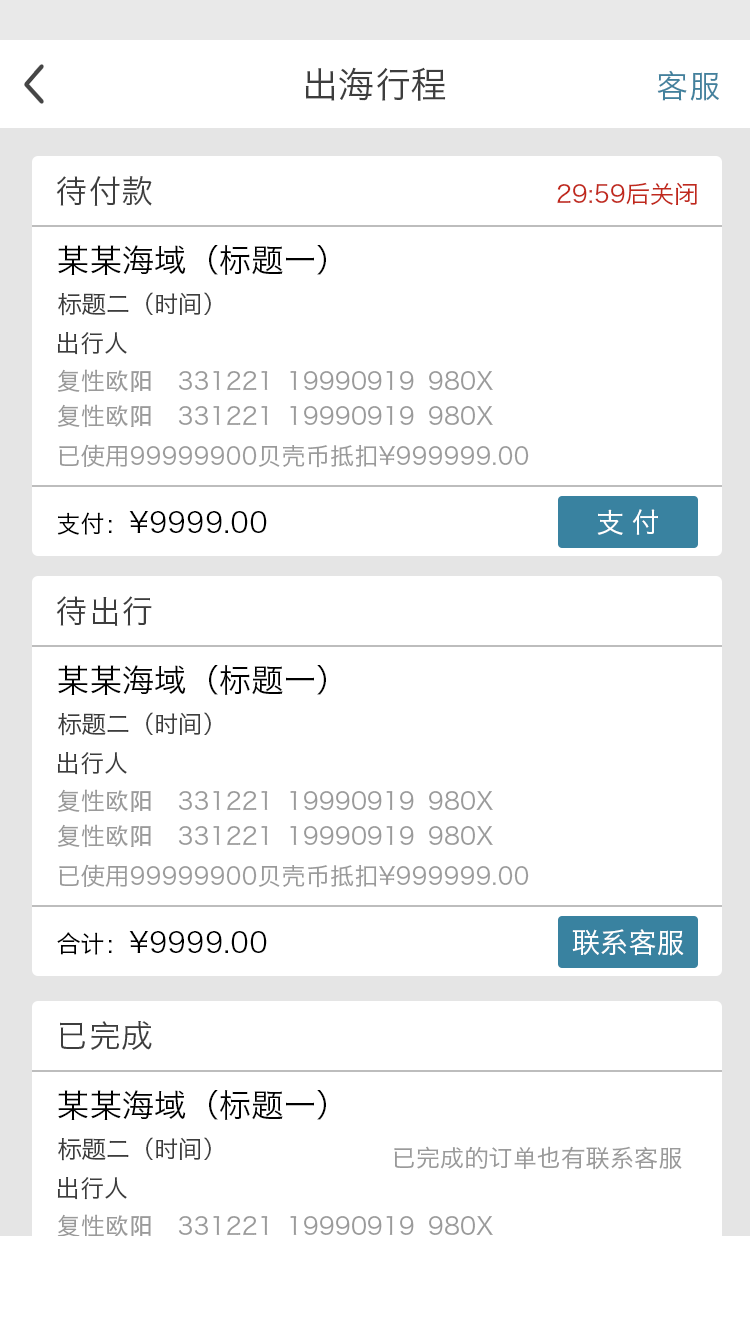
<style>
.page{position:relative;width:750px;height:1334px;background:#ffffff}
.page>*{position:absolute;margin:0}
.t1{font:36px "HiraginoSansGB-W3";color:#3d3d3d}
.t2{font:32px "HiraginoSansGB-W3";color:#42819d}
.t3{font:32px "HiraginoSansGB-W3";color:#3d3d3d}
.t4{font:24px "HiraginoSansGB-W3";color:#c1281c}
.t5{font:32px "HiraginoSansGB-W3";color:#000000}
.t6{font:24px "HiraginoSansGB-W3";color:#3d3d3d}
.t7{font:24px "HiraginoSansGB-W3";color:#9a9a9a}
.t8{font:24px "AdobeHeitiStd-Regular";color:#9a9a9a}
.t9{font:28px "HiraginoSansGB-W3";color:#ffffff}
.t10{font:28px "HiraginoSansGB-W3";color:#000000}
.t11{font:24px "HiraginoSansGB-W3";color:#000000}
</style>
<div class="page">
<p class="t1" style="left:305px;top:67px;width:141px;height:34px">出海行程</p>
<p class="t2" style="left:657px;top:70px;width:62px;height:31px">客服</p>
<p class="t3" style="left:56px;top:176px;width:96px;height:30px">待付款</p>
<p class="t4" style="left:557px;top:182px;width:140px;height:23px">29:59后关闭</p>
<p class="t5" style="left:58px;top:245px;width:268px;height:30px">某某海域（标题一）</p>
<p class="t6" style="left:58px;top:292px;width:153px;height:24px">标题二（时间）</p>
<p class="t6" style="left:57px;top:332px;width:70px;height:23px">出行人</p>
<p class="t7" style="left:57px;top:369px;width:94px;height:24px">复性<span class="t8">欧阳</span></p>
<p class="t7" style="left:178px;top:371px;width:315px;height:20px">331221  19990919  980X</p>
<p class="t7" style="left:57px;top:404px;width:94px;height:24px">复性<span class="t8">欧阳</span></p>
<p class="t7" style="left:178px;top:406px;width:315px;height:20px">331221  19990919  980X</p>
<p class="t7" style="left:59px;top:444px;width:470px;height:24px">已使用99999900贝壳币抵扣¥999999.00</p>
<p class="t9" style="left:597px;top:509px;width:61px;height:26px">支 付</p>
<p class="t10" style="left:57px;top:511px;width:210px;height:24px"><span class="t11">支付：</span>¥9999.00</p>
<p class="t3" style="left:56px;top:596px;width:96px;height:30px">待出行</p>
<p class="t5" style="left:58px;top:665px;width:268px;height:30px">某某海域（标题一）</p>
<p class="t6" style="left:58px;top:712px;width:153px;height:24px">标题二（时间）</p>
<p class="t6" style="left:57px;top:752px;width:70px;height:23px">出行人</p>
<p class="t7" style="left:57px;top:789px;width:94px;height:24px">复性<span class="t8">欧阳</span></p>
<p class="t7" style="left:178px;top:791px;width:315px;height:20px">331221  19990919  980X</p>
<p class="t7" style="left:57px;top:824px;width:94px;height:24px">复性<span class="t8">欧阳</span></p>
<p class="t7" style="left:178px;top:826px;width:315px;height:20px">331221  19990919  980X</p>
<p class="t7" style="left:59px;top:864px;width:470px;height:24px">已使用99999900贝壳币抵扣¥999999.00</p>
<p class="t9" style="left:572px;top:929px;width:112px;height:27px">联系客服</p>
<p class="t10" style="left:57px;top:931px;width:210px;height:24px"><span class="t11">合计：</span>¥9999.00</p>
<p class="t3" style="left:60px;top:1021px;width:92px;height:29px">已完成</p>
<p class="t5" style="left:58px;top:1090px;width:268px;height:30px">某某海域（标题一）</p>
<p class="t6" style="left:58px;top:1137px;width:153px;height:24px">标题二（时间）</p>
<p class="t7" style="left:394px;top:1146px;width:288px;height:24px">已完成的订单也有联系客服</p>
<p class="t6" style="left:57px;top:1177px;width:70px;height:23px">出行人</p>
<p class="t7" style="left:57px;top:1214px;width:94px;height:24px">复性<span class="t8">欧阳</span></p>
<p class="t7" style="left:178px;top:1216px;width:315px;height:20px">331221  19990919  980X</p>
</div>
